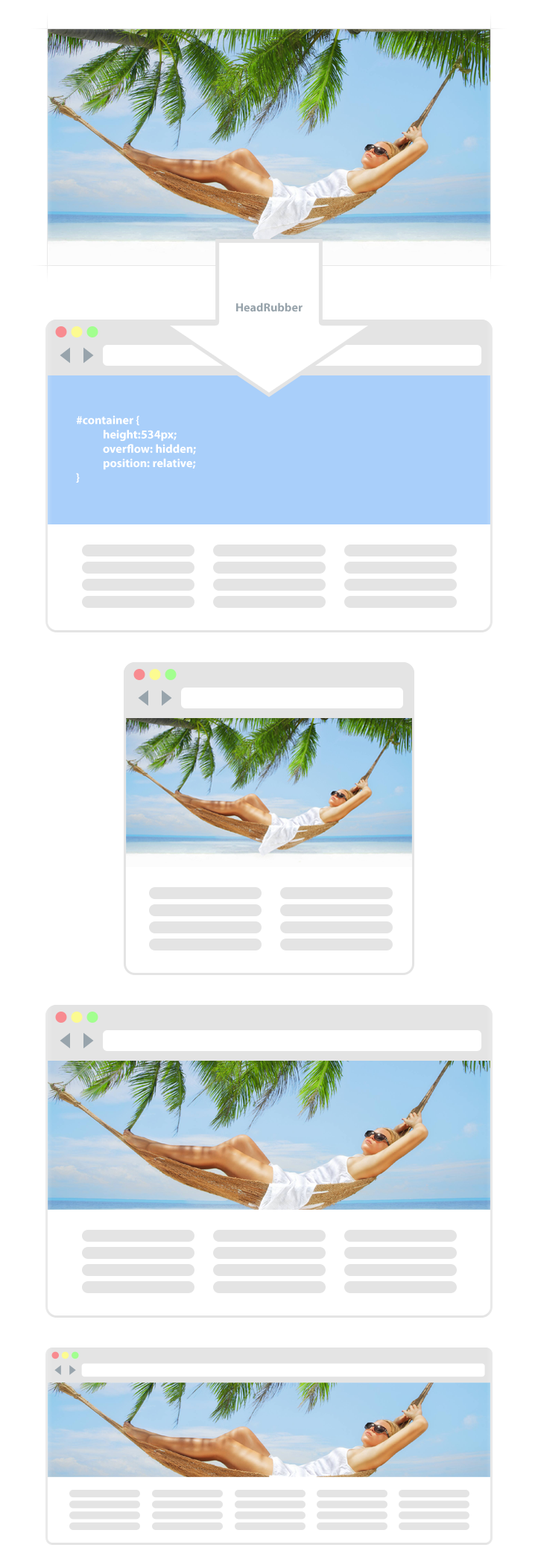
<style>
.page{position:relative;width:538px;height:1568px;background:#ffffff}
.page>*{position:absolute;margin:0}
.t1{font:11.9px "MyriadPro-Bold";color:#98a4ac}
.t2{font:11.9px "MyriadPro-Bold";color:#ffffff}
</style>
<div class="page">
<p class="t1" style="left:236px;top:302px;width:66px;height:10px">HeadRubber</p>
<p class="t2" style="left:76px;top:416px;width:120px;height:67px">#container {<br> height:534px;<br> overflow: hidden;<br> position: relative;<br>}</p>
</div>
